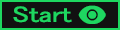
<style>
.page{position:relative;width:120px;height:30px;background:#111111}
.page>*{position:absolute;margin:0}
.t1{font:22.8px "MS-UIGothic";letter-spacing:-0.02em;color:#1dd555;font-weight:bold;scale:1.2 1}
</style>
<div class="page">
<p class="t1" style="left:13px;top:6px;width:59px;height:17px">Start</p>
</div>
